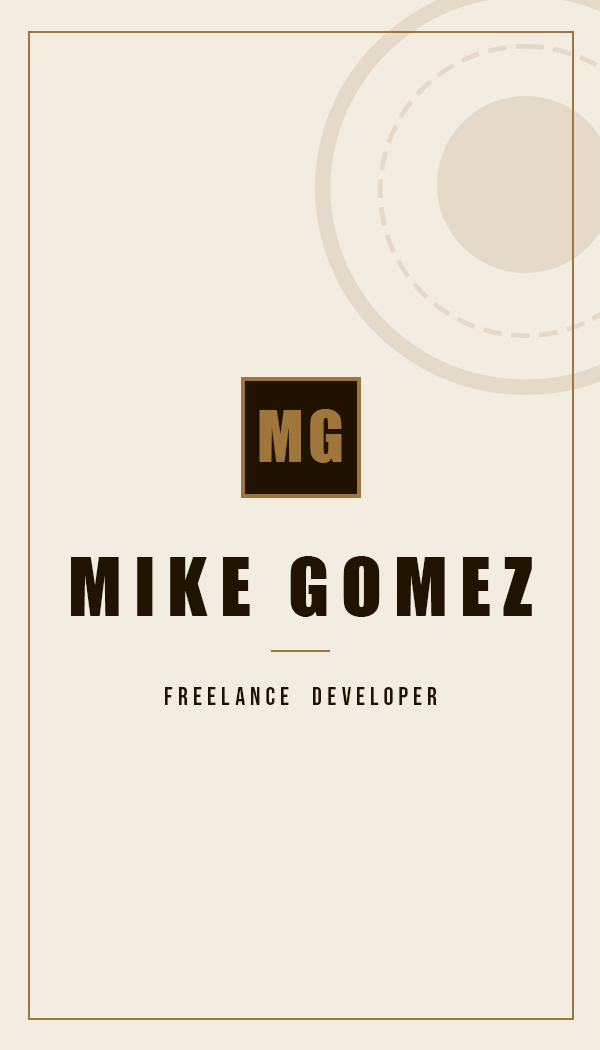
<style>
.page{position:relative;width:600px;height:1050px;background:#f2ece1}
.page>*{position:absolute;margin:0}
.t1{font:65.9px "Impact";letter-spacing:0.06em;color:#a1763c}
.t2{font:75px "Impact";letter-spacing:0.16em;color:#201300}
.t3{font:25px "BebasNeue-Regular";letter-spacing:0.2em;color:#201300}
</style>
<div class="page">
<p class="t1" style="left:259px;top:409px;width:83px;height:54px">MG</p>
<p class="t2" style="left:71px;top:556px;width:461px;height:61px">MIKE GOMEZ</p>
<p class="t3" style="left:165px;top:687px;width:272px;height:18px">Freelance  Developer</p>
</div>
